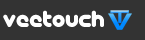
<style>
.page{position:relative;width:145px;height:40px;background:#333333}
.page>*{position:absolute;margin:0}
.t1{font:24px "PicoBlackAl";color:#ffffff}
</style>
<div class="page">
<p class="t1" style="left:3px;top:10px;width:101px;height:17px">VeeTouch</p>
</div>
